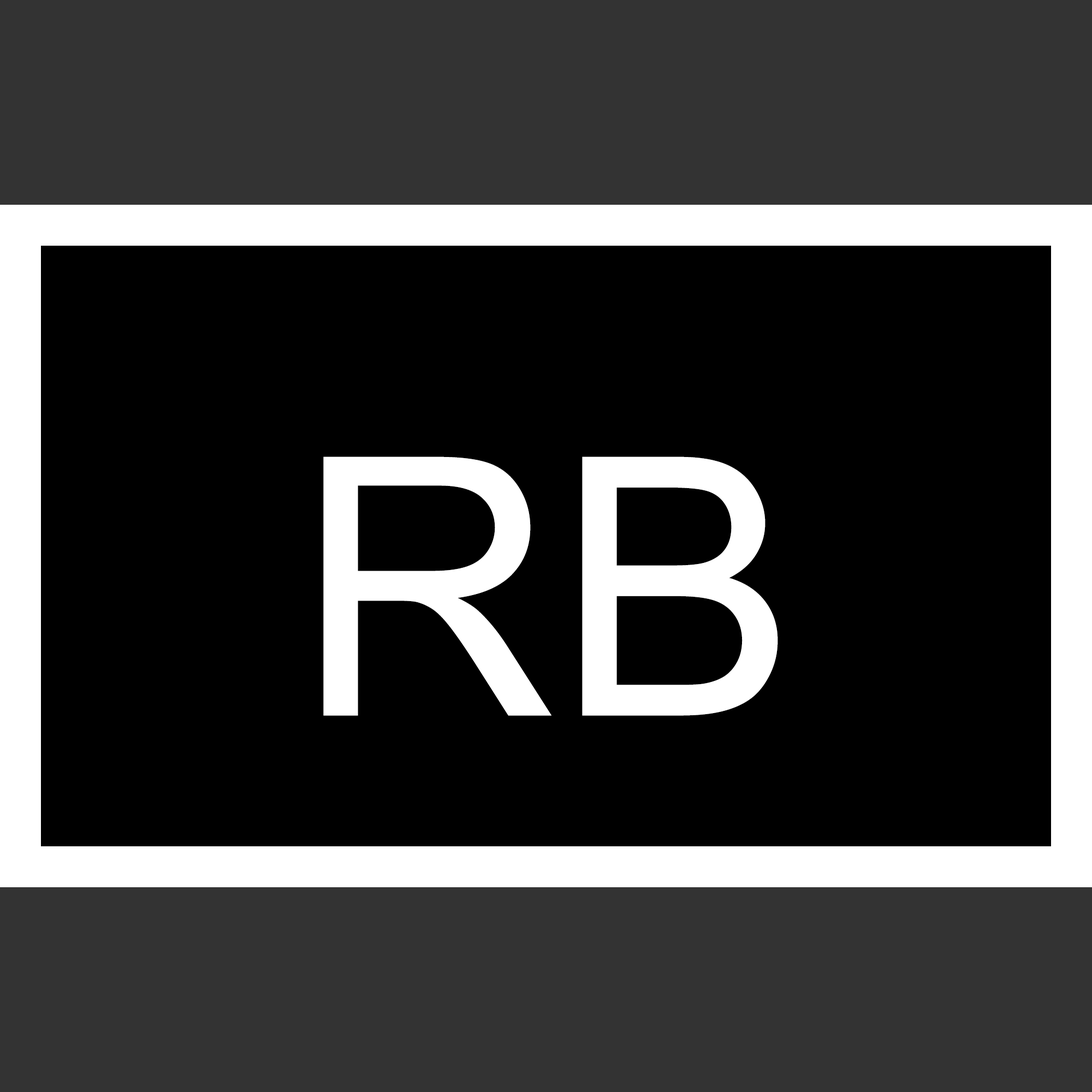
<style>
.page{position:relative;width:1092px;height:1092px;background:#000000}
.page>*{position:absolute;margin:0}
.t1{font:361.1px "ArialMT";color:#ffffff}
</style>
<div class="page">
<p class="t1" style="left:323px;top:456px;width:455px;height:260px">RB</p>
</div>
